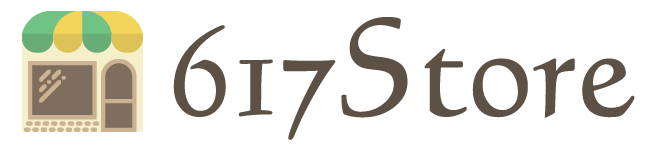
<style>
.page{position:relative;width:650px;height:160px;background:#ffffff}
.page>*{position:absolute;margin:0}
.t1{font:133.3px "Calligraphic421BT-RomanB";color:#5d5145}
</style>
<div class="page">
<p class="t1" style="left:173px;top:17px;width:462px;height:123px">617Store</p>
</div>
